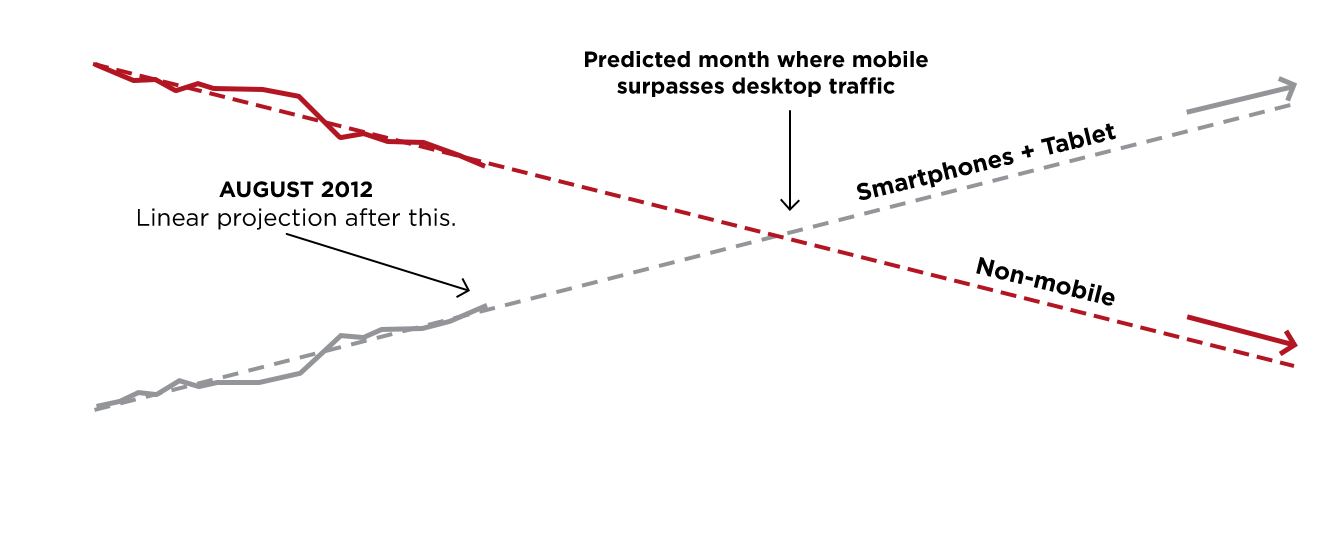
<style>
.page{position:relative;width:1317px;height:546px;background:#ffffff}
.page>*{position:absolute;margin:0}
.t1{font:22px "Gotham-Bold";color:#000000}
.t2{font:24px "Gotham-Bold";color:#000000}
.t3{font:24px "Gotham-Book";color:#000000}
.t4{font:22px "Gotham-Bold";color:#000000;text-transform:uppercase}
.t5{font:24px "Gotham-Book";color:#000000;text-transform:uppercase}
</style>
<div class="page">
<p class="t1" style="left:585px;top:51px;width:343px;height:46px;text-align:center">Predicted month where mobile<br>surpasses desktop traffic</p>
<p class="t2" style="left:857px;top:123px;width:259px;height:77px;rotate:-14deg">Smartphones + Tablet</p>
<p class="t3" style="left:138px;top:181px;width:317px;height:49px;text-align:center"><span class="t4">AUGUST 2012<br></span><span class="t5">L</span>inear projection after this.</p>
<p class="t2" style="left:976px;top:257px;width:139px;height:49px;rotate:14deg">Non-mobile</p>
</div>
